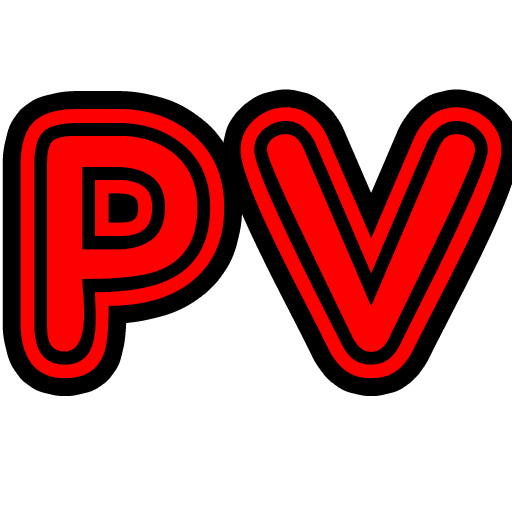
<style>
.page{position:relative;width:512px;height:512px;background:#ffffff}
.page>*{position:absolute;margin:0}
.t1{font:400px "ARDELANEY";color:#fd0000}
</style>
<div class="page">
<p class="t1" style="left:20px;top:107px;width:482px;height:271px">PV</p>
</div>
